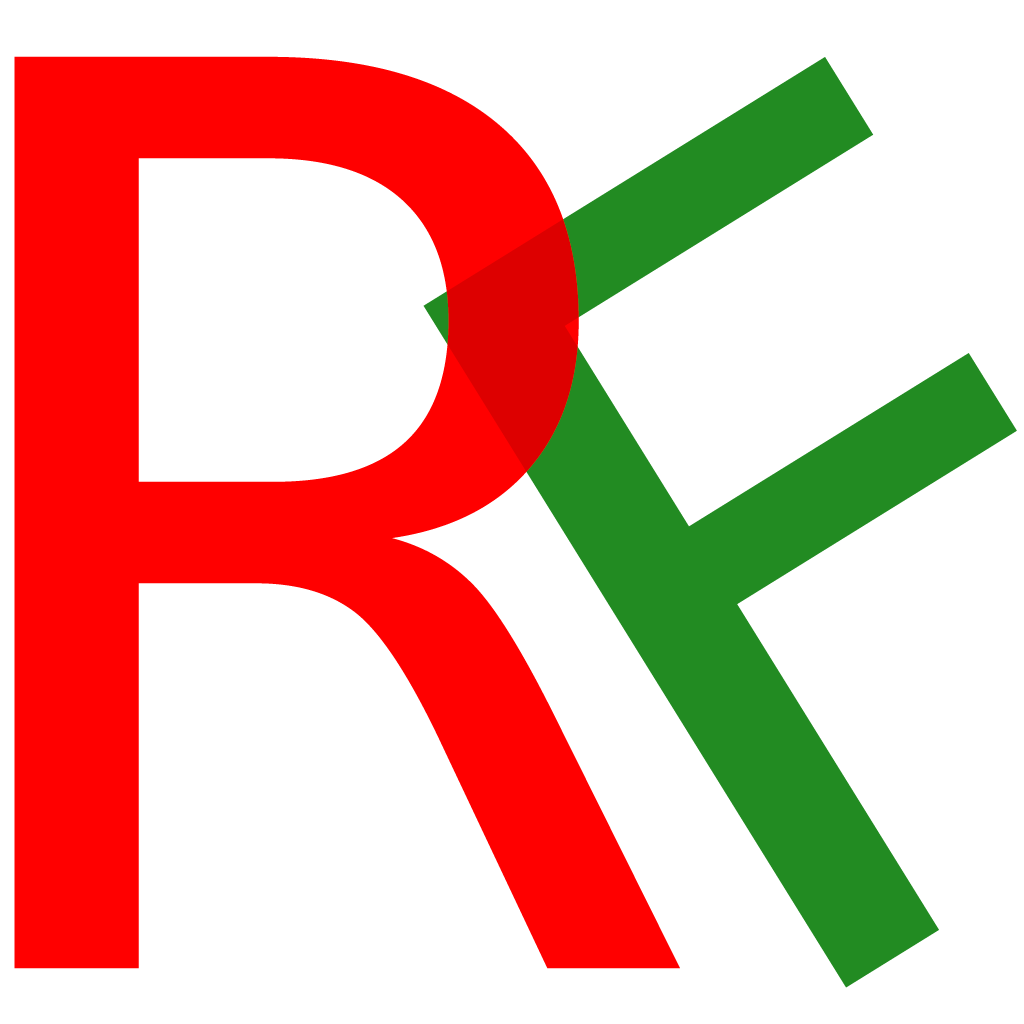
<style>
.page{position:relative;width:1024px;height:1024px;background:#ffffff}
.page>*{position:absolute;margin:0}
.t1{font:1250px "DejaVuSansMono";color:#ff0000}
.t2{font:1100px "DejaVuSansMono";color:#228b22}
</style>
<div class="page">
<p class="t1" style="left:14px;top:56px;width:666px;height:913px">R</p>
<p class="t2" style="left:423px;top:57px;width:594px;height:931px;rotate:-32deg">F</p>
</div>
